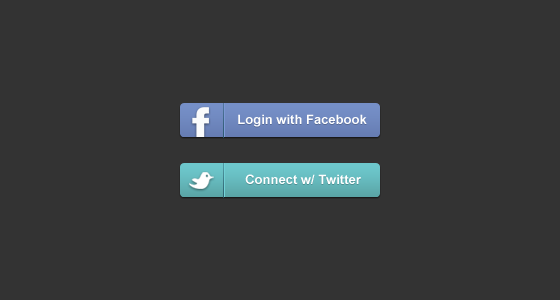
<style>
.page{position:relative;width:560px;height:300px;background:#333333}
.page>*{position:absolute;margin:0}
.t1{font:13px "Arial-BoldMT";color:#ffffff}
</style>
<div class="page">
<p class="t1" style="left:238px;top:114px;width:129px;height:13px">Login with Facebook</p>
<p class="t1" style="left:245px;top:174px;width:116px;height:10px">Connect w/ Twitter</p>
</div>
